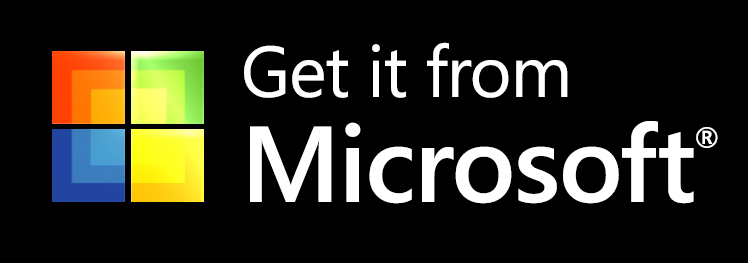
<style>
.page{position:relative;width:748px;height:263px;background:#000000}
.page>*{position:absolute;margin:0}
.t1{font:71.7px/105px "SegoeUI";letter-spacing:-0.015em;color:#ffffff}
.t2{font:107.5px/105px "SegoeUI-SemiBold";letter-spacing:-0.015em;color:#ffffff}
.t3{font:48.7px/105px "SegoeUI-SemiBold";letter-spacing:-0.015em;color:#ffffff}
</style>
<div class="page">
<p class="t1" style="left:244px;top:42px;width:474px;height:162px">Get it from<br><span class="t2">Microsoft</span><span class="t3">®</span></p>
</div>
